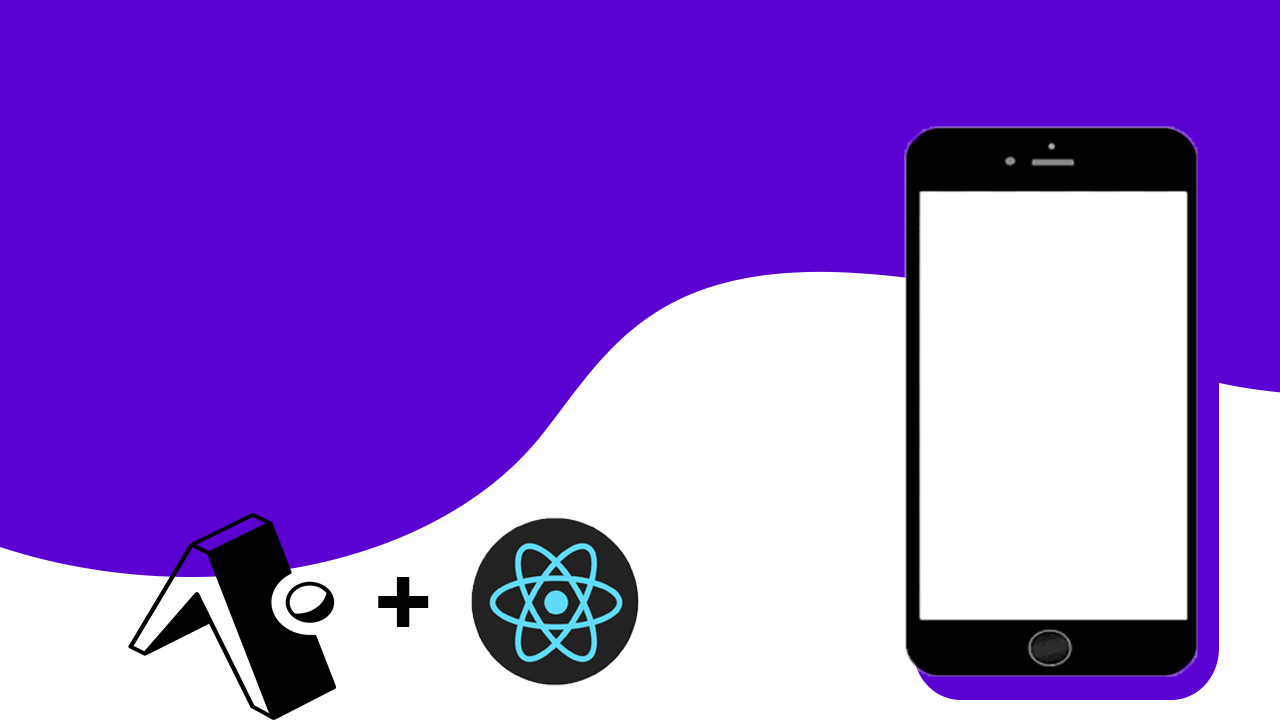
<style>
.page{position:relative;width:1280px;height:720px;background:#5a02d2}
.page>*{position:absolute;margin:0}
.t1{font:100px "Arial-BoldMT";color:#000000}
</style>
<div class="page">
<p class="t1" style="left:378px;top:577px;width:51px;height:50px">+</p>
</div>
